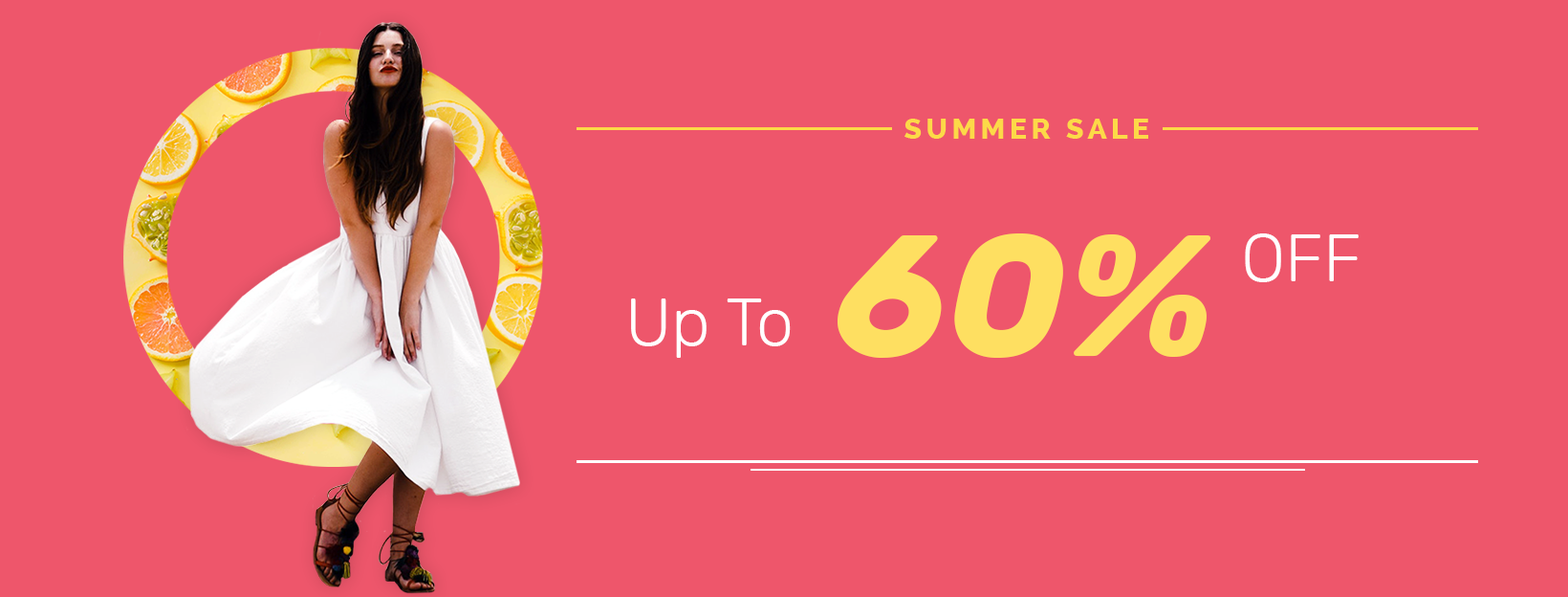
<style>
.page{position:relative;width:1568px;height:597px;background:#ee566b}
.page>*{position:absolute;margin:0}
.t1{font:28.7px "Raleway-ExtraBold";letter-spacing:0.15em;color:#fcd948;text-transform:uppercase}
.t2{font:172.1px "Rubik-BoldItalic";color:#fedf61}
.t3{font:66.9px "Rubik-Light";color:#ffffff}
</style>
<div class="page">
<p class="t1" style="left:904px;top:119px;width:244px;height:20px">SUMMER SALE</p>
<p class="t2" style="left:838px;top:233px;width:372px;height:125px">60%</p>
<p class="t3" style="left:1245px;top:233px;width:114px;height:49px">OFF</p>
<p class="t3" style="left:631px;top:298px;width:160px;height:60px">Up To</p>
</div>
